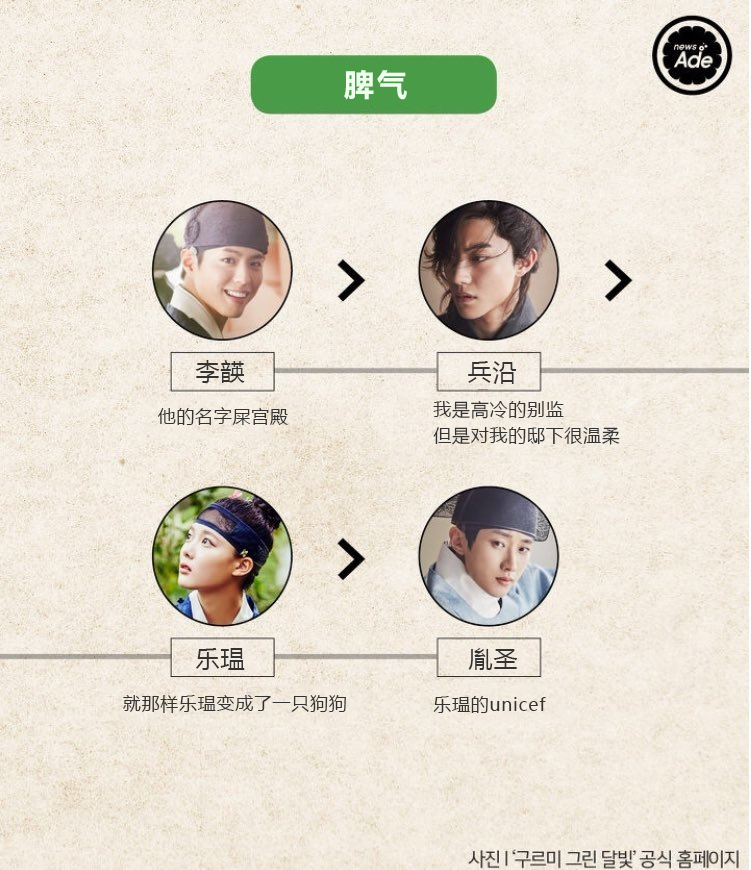
<style>
.page{position:relative;width:751px;height:870px}
.page>*{position:absolute;margin:0}
.t1{font:32px "FZLTCHK--GBK1-0";letter-spacing:0.04em;color:#efffee}
.t2{font:24px "MicrosoftYaHei";letter-spacing:0.04em;color:#333333}
.t3{font:18px/26.7px "MicrosoftYaHei";letter-spacing:0.04em;color:#333333}
.t4{font:18px "MicrosoftYaHei";letter-spacing:0.04em;color:#333333}
</style>
<div class="page">
<p class="t1" style="left:344px;top:70px;width:63px;height:30px">脾气</p>
<p class="t2" style="left:195px;top:360px;width:50px;height:23px">李韺</p>
<p class="t2" style="left:468px;top:361px;width:49px;height:23px">兵沿</p>
<p class="t3" style="left:433px;top:401px;width:187px;height:44px">我是高冷的别监<br>但是对我的邸下很温柔</p>
<p class="t4" style="left:158px;top:407px;width:130px;height:18px">他的名字屎宫殿</p>
<p class="t2" style="left:196px;top:648px;width:49px;height:22px">乐瑥</p>
<p class="t2" style="left:468px;top:648px;width:50px;height:22px">胤圣</p>
<p class="t4" style="left:123px;top:695px;width:223px;height:18px">就那样乐瑥变成了一只狗狗</p>
<p class="t4" style="left:433px;top:696px;width:113px;height:17px">乐瑥的unicef</p>
</div>
